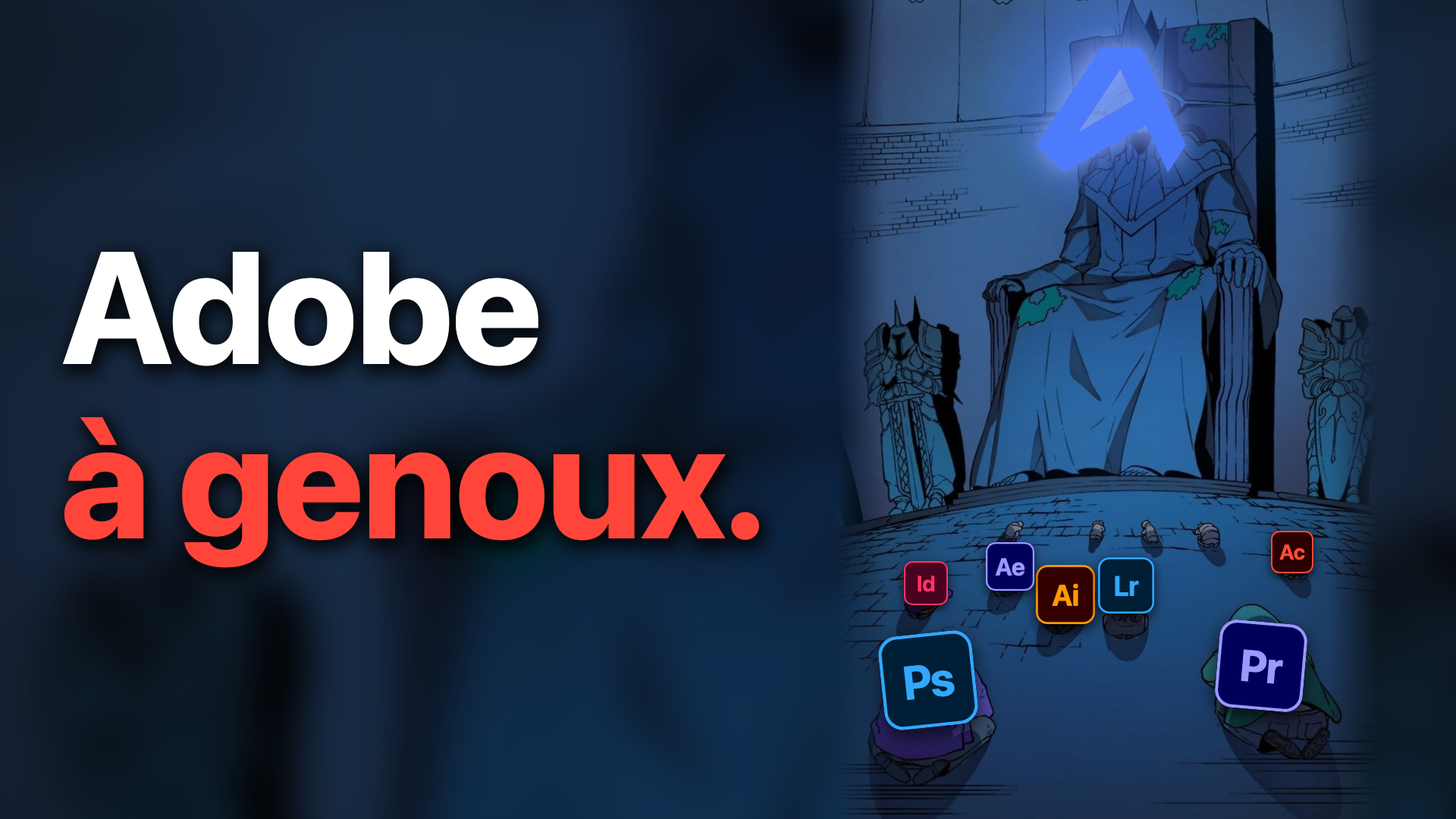
<style>
.page{position:relative;width:1456px;height:819px}
.page>*{position:absolute;margin:0}
.t1{font:159.2px ".SFNS-Regular";letter-spacing:-0.01em;color:#ffffff}
.t2{font:159.2px ".SFNS-Regular";letter-spacing:-0.01em;color:#ff453a}
</style>
<div class="page">
<p class="t1" style="left:61px;top:252px;width:478px;height:115px">Adobe</p>
<p class="t2" style="left:63px;top:417px;width:697px;height:152px">à genoux.</p>
</div>
